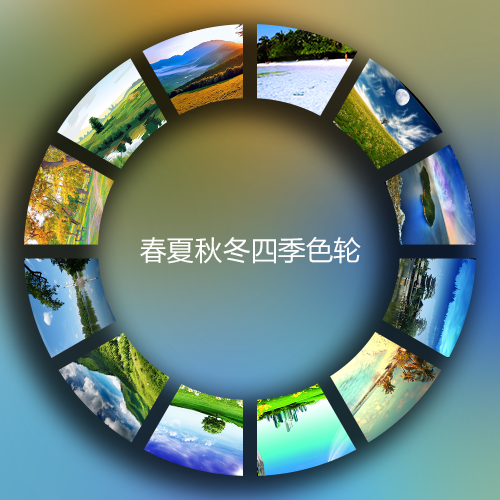
<style>
.page{position:relative;width:500px;height:500px}
.page>*{position:absolute;margin:0}
.t1{font:27.9px "FZLTHJW--GB1-0";letter-spacing:-0.02em;color:#ffffff}
</style>
<div class="page">
<p class="t1" style="left:140px;top:237px;width:221px;height:27px">春夏秋冬四季色轮</p>
</div>
